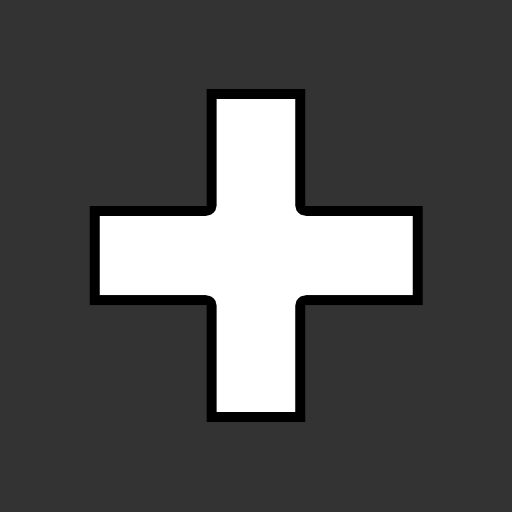
<style>
.page{position:relative;width:512px;height:512px;background:#333333}
.page>*{position:absolute;margin:0}
.t1{font:625px "Arial-Black";color:#ffffff}
</style>
<div class="page">
<p class="t1" style="left:89px;top:89px;width:334px;height:333px">+</p>
</div>
